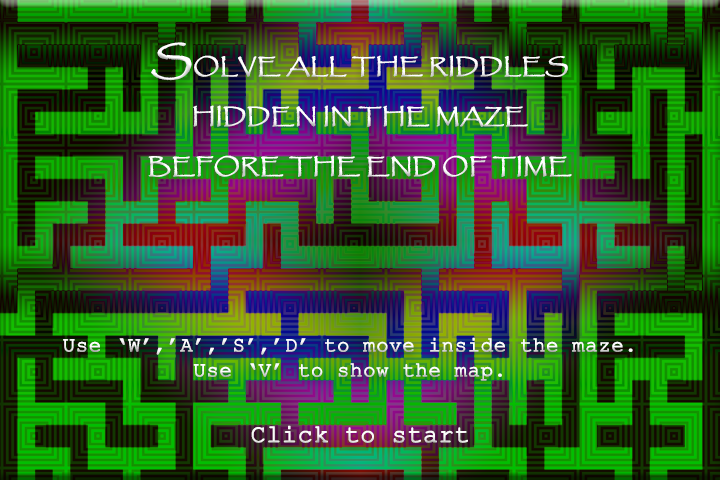
<style>
.page{position:relative;width:720px;height:480px}
.page>*{position:absolute;margin:0}
.t1{font:20.8px "Papyrus-Regular";color:#ffffff;font-weight:bold;scale:1.13 1}
.t2{font:37.5px "Papyrus-Regular";color:#ffffff;font-weight:bold;scale:1.13 1}
.t3{font:20.8px "CourierNewPSMT";color:#fdfdfd;font-weight:bold}
.t4{font:25px "CourierNewPSMT";color:#fbfbfb;font-weight:bold}
</style>
<div class="page">
<p class="t1" style="left:148px;top:42px;width:424px;height:135px;text-align:center"><span class="t2">S</span>OLVE ALL THE RIDDLES<br><br>HIDDEN IN THE MAZE<br><br>BEFORE THE END OF TIME</p>
<p class="t3" style="left:63px;top:337px;width:570px;height:44px;text-align:center">Use ‘W’,’A’,’S’,’D’ to move inside the maze.<br>Use ‘V’ to show the map.</p>
<p class="t4" style="left:251px;top:425px;width:217px;height:18px">Click to start</p>
</div>
